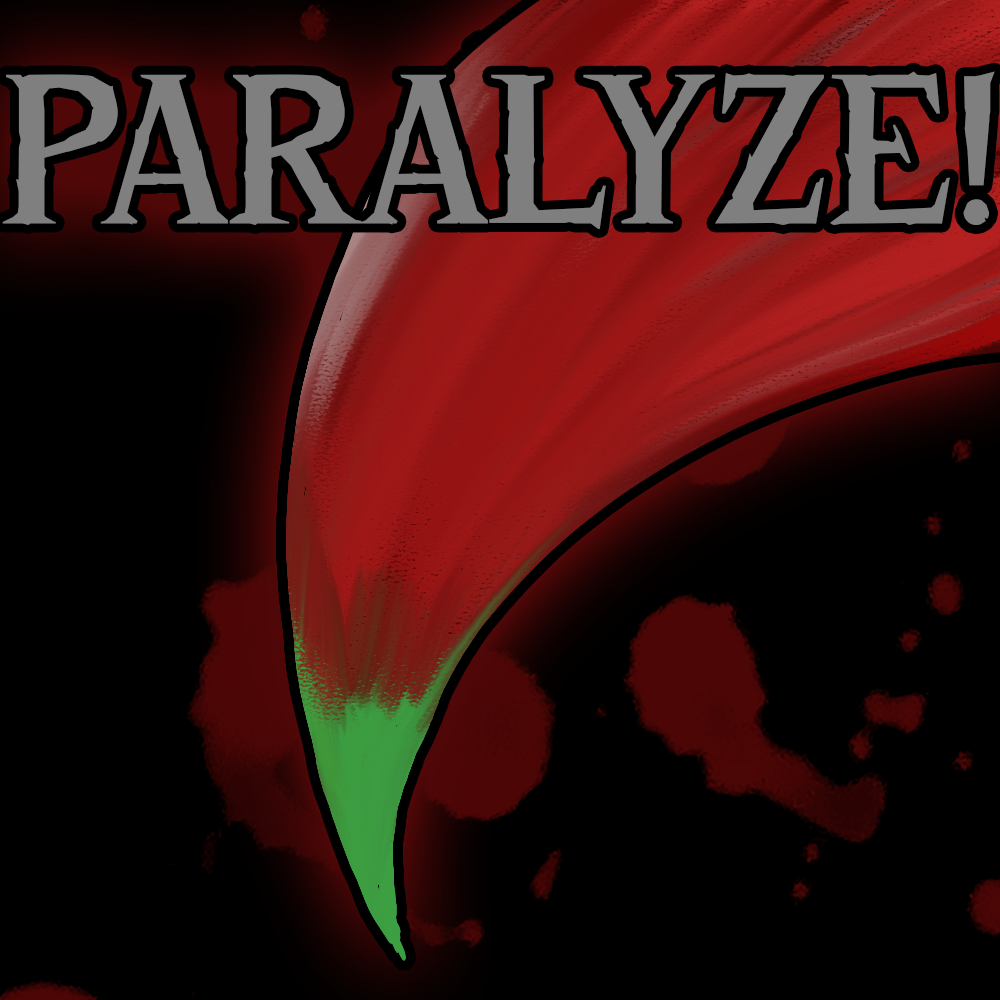
<style>
.page{position:relative;width:1000px;height:1000px;background:#000000}
.page>*{position:absolute;margin:0}
.t1{font:231.3px "KONSTANTINERegular";color:#7f7f7f}
</style>
<div class="page">
<p class="t1" style="left:2px;top:71px;width:993px;height:158px">paralyze!</p>
</div>
